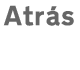
<style>
.page{position:relative;width:80px;height:70px;background:#ffffff}
.page>*{position:absolute;margin:0}
.t1{font:26px "Transport-Heavy-Regular";color:#666666}
</style>
<div class="page">
<p class="t1" style="left:3px;top:5px;width:71px;height:21px">Atrás</p>
</div>
